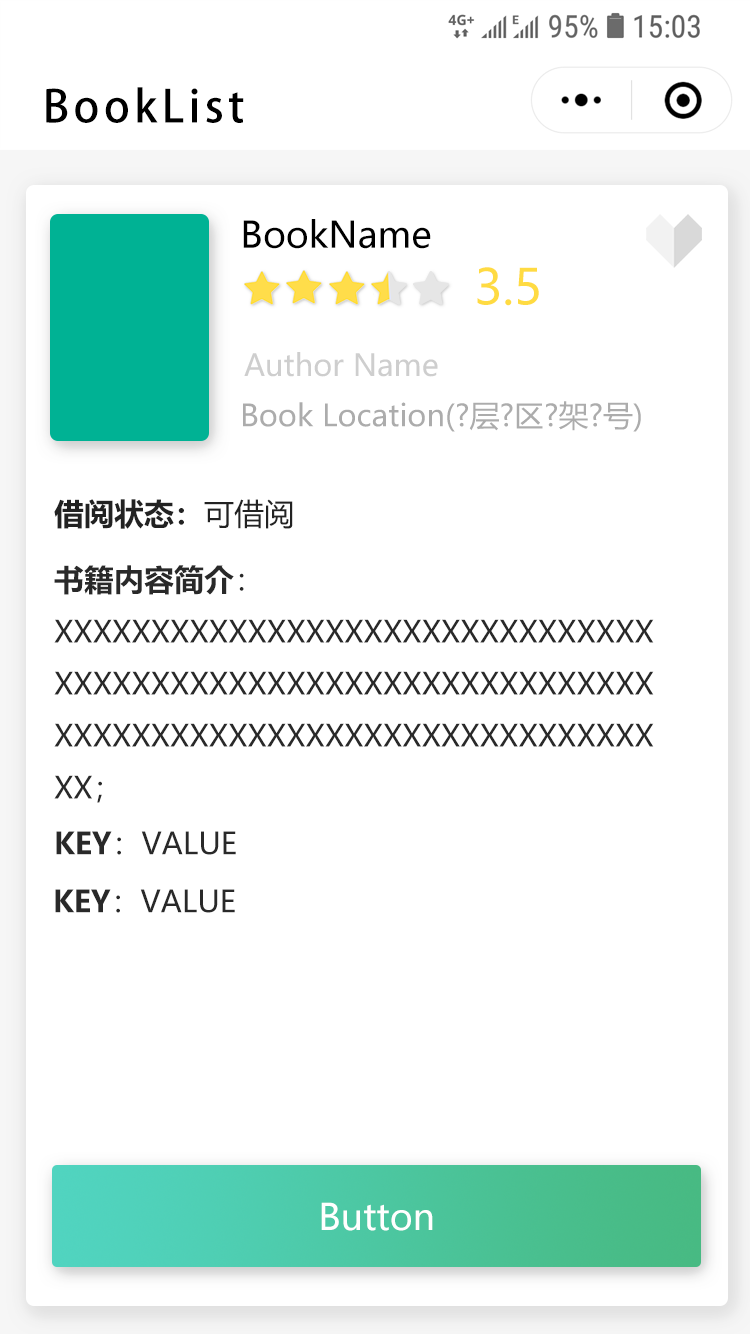
<style>
.page{position:relative;width:750px;height:1334px;background:#ffffff}
.page>*{position:absolute;margin:0}
.t1{font:44px "AdobeHeitiStd-Regular";letter-spacing:0.1em;color:#000000}
.t2{font:36px "MicrosoftYaHeiUI";color:#000000}
.t3{font:48.6px "MicrosoftYaHeiUI";color:#ffdb42}
.t4{font:30.1px "MicrosoftYaHeiUI";color:#cecece}
.t5{font:30.1px "MicrosoftYaHeiUI";color:#acacac}
.t6{font:30px "MicrosoftYaHeiUI-Bold";color:#222222}
.t7{font:30px "MicrosoftYaHeiUI";color:#222222}
.t8{font:30px/52px "MicrosoftYaHeiUI";color:#292929}
.t9{font:30px/52px "MicrosoftYaHeiUI-Bold";color:#292929}
.t10{font:30px "MicrosoftYaHeiUI";color:#292929}
.t11{font:30px "MicrosoftYaHeiUI-Bold";color:#292929}
.t12{font:36px "MicrosoftYaHeiUI";color:#ffffff}
</style>
<div class="page">
<p class="t1" style="left:46px;top:87px;width:198px;height:36px">BookList</p>
<p class="t2" style="left:243px;top:219px;width:188px;height:30px">BookName</p>
<p class="t3" style="left:477px;top:267px;width:62px;height:39px">3.5</p>
<p class="t4" style="left:244px;top:352px;width:194px;height:25px">Author Name</p>
<p class="t5" style="left:243px;top:401px;width:398px;height:31px">Book Location(?层?区?架?号)</p>
<p class="t6" style="left:54px;top:499px;width:239px;height:30px">借阅状态：<span class="t7">可借阅</span></p>
<p class="t8" style="left:54px;top:565px;width:600px;height:238px"><span class="t9">书籍内容简介</span>：XXXXXXXXXXXXXXXXXXXXXXXXXXXXXXXXXXXXXXXXXXXXXXXXXXXXXXXXXXXXXXXXXXXXXXXXXXXXXXXXXXXXXXXXXXXXXXX；</p>
<p class="t10" style="left:56px;top:831px;width:180px;height:24px"><span class="t11">KEY</span>：VALUE</p>
<p class="t10" style="left:55px;top:889px;width:180px;height:24px"><span class="t11">KEY</span>：VALUE</p>
<p class="t12" style="left:321px;top:1202px;width:112px;height:29px">Button</p>
</div>
